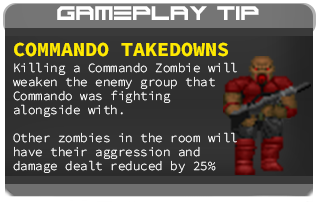
<style>
.page{position:relative;width:320px;height:205px}
.page>*{position:absolute;margin:0}
.t1{font:13.8px "ScifiAdventure";color:#ffffff}
.t2{font:20px "SourceCodeRoman-Bold";color:#ffea00}
.t3{font:12.5px/14px "SourceCodeRoman-Light";color:#ffffff}
</style>
<div class="page">
<p class="t1" style="left:57px;top:6px;width:202px;height:14px">GAMEPLAY TIP</p>
<p class="t2" style="left:14px;top:42px;width:214px;height:15px">COMMANDO TAKEDOWNS</p>
<p class="t3" style="left:13px;top:62px;width:224px;height:111px">Killing a Commando Zombie will <br>weaken the enemy group that <br>Commando was fighting <br>alongside with.<br><br>Other zombies in the room will<br>have their aggression and<br>damage dealt reduced by 25%</p>
</div>
